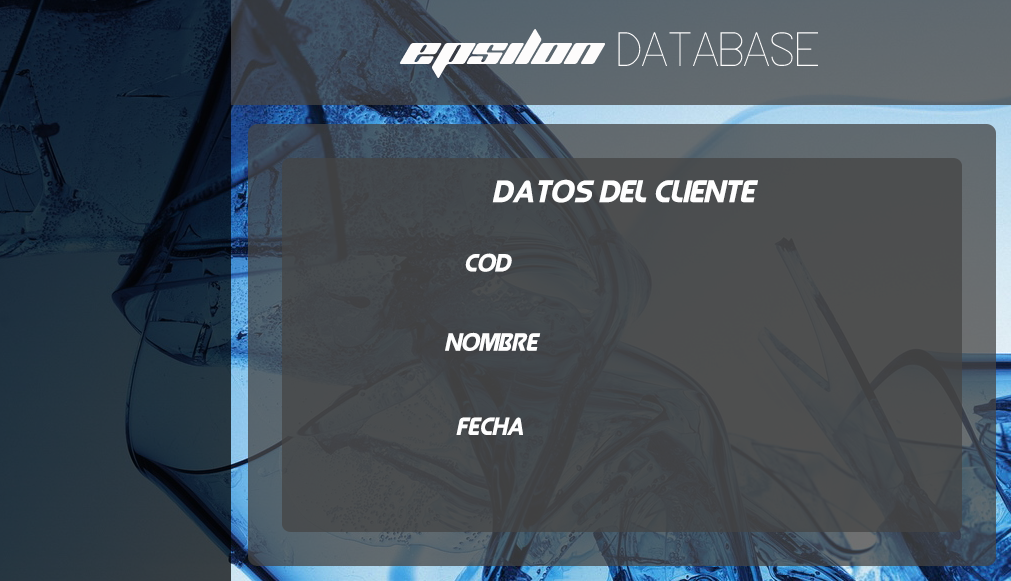
<style>
.page{position:relative;width:1011px;height:581px}
.page>*{position:absolute;margin:0}
.t1{font:32px "QueenofCamelot-Italic";color:#fefefe}
.t2{font:25.4px "QueenofCamelot-Italic";color:#fefefe}
</style>
<div class="page">
<p class="t1" style="left:492px;top:179px;width:266px;height:24px">Datos del cliente</p>
<p class="t2" style="left:465px;top:253px;width:47px;height:19px">Cod</p>
<p class="t2" style="left:445px;top:332px;width:96px;height:19px">Nombre</p>
<p class="t2" style="left:456px;top:417px;width:67px;height:18px">Fecha</p>
</div>
